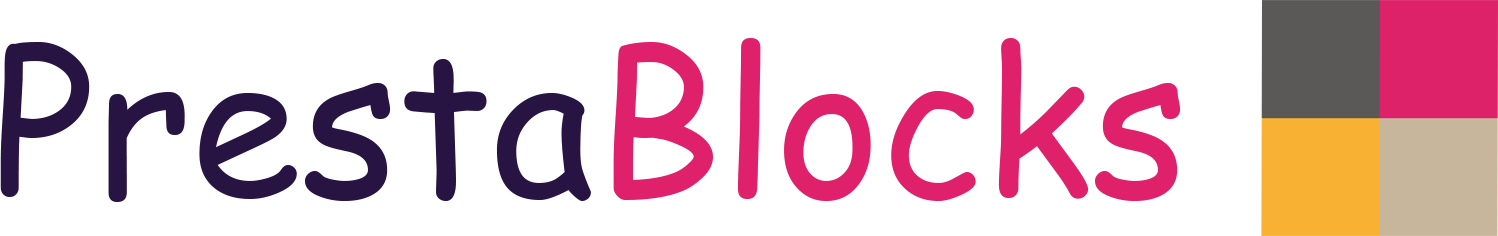
<style>
.page{position:relative;width:1498px;height:236px;background:#ffffff}
.page>*{position:absolute;margin:0}
.t1{font:200px "ComicSansMS";color:#271443}
.t2{font:200px "ComicSansMS";color:#de216a}
</style>
<div class="page">
<p class="t1" style="left:0px;top:38px;width:1181px;height:164px">Presta<span class="t2">Blocks</span></p>
</div>
